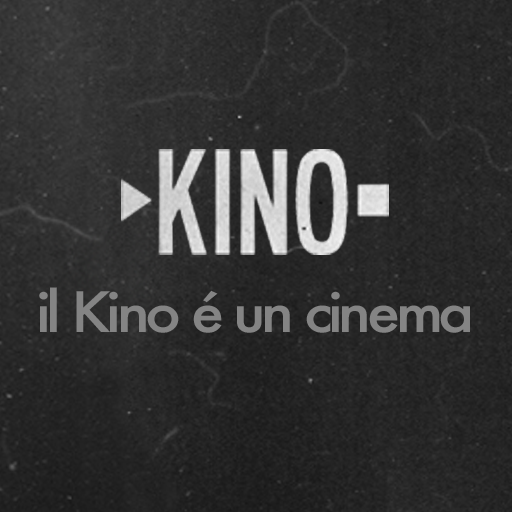
<style>
.page{position:relative;width:512px;height:512px}
.page>*{position:absolute;margin:0}
.t1{font:54px "Futura-Medium";letter-spacing:-0.075em;color:#848484;scale:1.11 1}
</style>
<div class="page">
<p class="t1" style="left:39px;top:287px;width:431px;height:46px">il Kino é un cinema</p>
</div>
